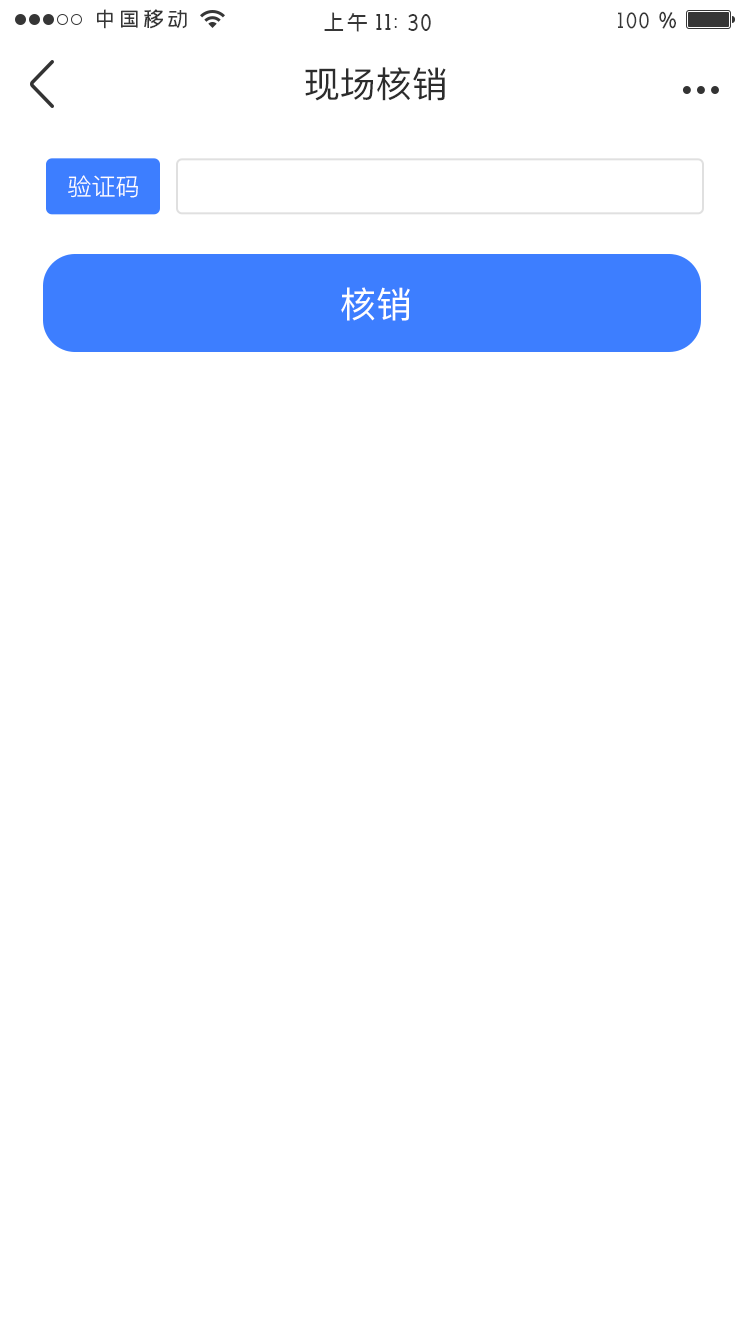
<style>
.page{position:relative;width:750px;height:1334px;background:#ffffff}
.page>*{position:absolute;margin:0}
.t1{font:36px "PingFang-SC-Medium";color:#2c2c2c;text-transform:uppercase}
.t2{font:24px "PingFang-SC-Regular";color:#ffffff}
.t3{font:36px "PingFang-SC-Medium";color:#ffffff}
</style>
<div class="page">
<p class="t1" style="left:305px;top:67px;width:141px;height:34px">现场核销</p>
<p class="t2" style="left:68px;top:175px;width:70px;height:23px">验证码</p>
<p class="t3" style="left:341px;top:287px;width:69px;height:34px">核销</p>
</div>
